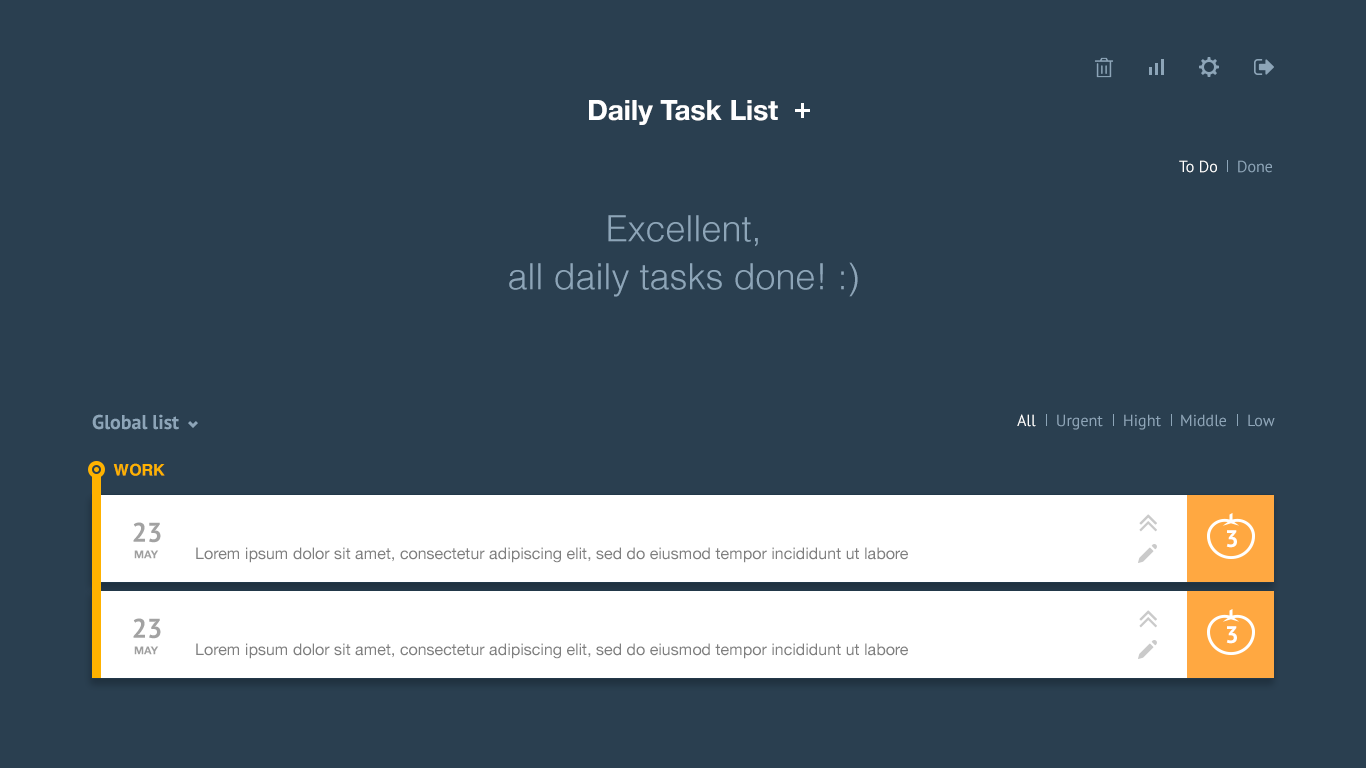
<style>
.page{position:relative;width:1366px;height:768px;background:#2a3f50}
.page>*{position:absolute;margin:0}
.t1{font:28px "HelveticaNeue-Bold";color:#ffffff}
.t2{font:16px "PTSans-Regular";color:#ffffff}
.t3{font:16px "PTSans-Regular";color:#8da5b8}
.t4{font:36px/48px "Helvetica-Light";color:#8da5b8}
.t5{font:20px "PTSans-Bold";color:#8da5b8}
.t6{font:16px "PTSans-Regular";color:#8ea5b8}
.t7{font:16px "Helvetica-Bold";color:#ffb200}
.t8{font:27px "PTSans-Bold";color:#a2a2a2}
.t9{font:24px "PTSans-Bold";color:#ffffff}
.t10{font:11px "HelveticaNeue-Bold";color:#9f9f9f}
.t11{font:16px "HelveticaNeue";color:#7f7f7f}
</style>
<div class="page">
<p class="t1" style="left:589px;top:100px;width:189px;height:25px">Daily Task List</p>
<p class="t2" style="left:1179px;top:160px;width:38px;height:13px">To Do</p>
<p class="t3" style="left:1238px;top:160px;width:34px;height:13px">Done</p>
<p class="t4" style="left:509px;top:215px;width:349px;height:82px;text-align:center">Excellent,<br>all daily tasks done! :)</p>
<p class="t5" style="left:92px;top:414px;width:87px;height:16px">Global list</p>
<p class="t2" style="left:1017px;top:414px;width:19px;height:13px">All</p>
<p class="t6" style="left:1057px;top:414px;width:46px;height:16px">Urgent</p>
<p class="t6" style="left:1124px;top:414px;width:37px;height:16px">Hight</p>
<p class="t6" style="left:1181px;top:414px;width:45px;height:13px">Middle</p>
<p class="t6" style="left:1248px;top:414px;width:27px;height:13px">Low</p>
<p class="t7" style="left:113px;top:463px;width:52px;height:13px">WORK</p>
<p class="t8" style="left:133px;top:522px;width:28px;height:21px">23</p>
<p class="t9" style="left:1226px;top:530px;width:11px;height:18px">3</p>
<p class="t10" style="left:134px;top:550px;width:25px;height:9px">MAY</p>
<p class="t11" style="left:196px;top:547px;width:712px;height:16px">Lorem ipsum dolor sit amet, consectetur adipiscing elit, sed do eiusmod tempor incididunt ut labore</p>
<p class="t8" style="left:133px;top:618px;width:28px;height:21px">23</p>
<p class="t9" style="left:1226px;top:626px;width:11px;height:18px">3</p>
<p class="t10" style="left:134px;top:646px;width:25px;height:9px">MAY</p>
<p class="t11" style="left:196px;top:643px;width:712px;height:16px">Lorem ipsum dolor sit amet, consectetur adipiscing elit, sed do eiusmod tempor incididunt ut labore</p>
</div>
